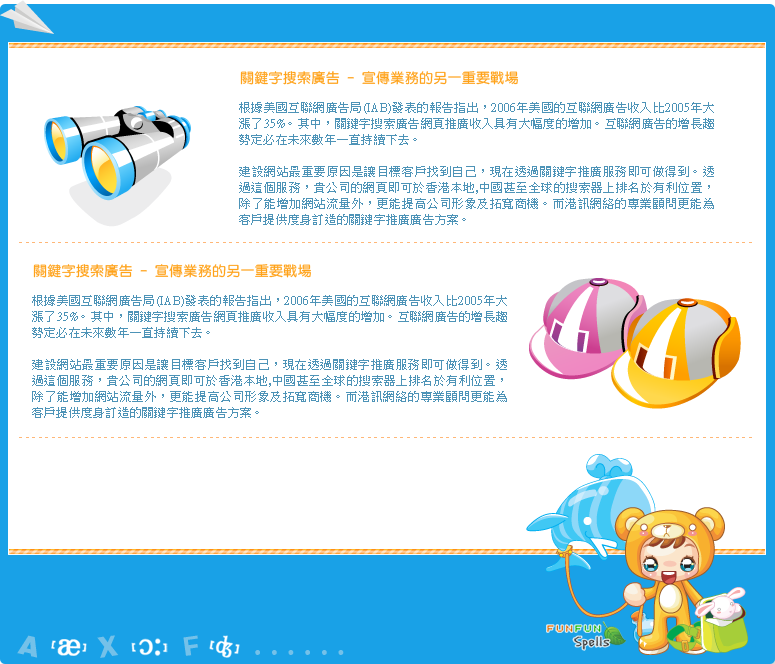
<style>
.page{position:relative;width:775px;height:664px;background:#ffffff}
.page>*{position:absolute;margin:0}
.t1{font:14px "DFYuan-Md-HK-BF";letter-spacing:0.02em;color:#ffa219}
.t2{font:12px/16px "PMingLiU";letter-spacing:0.02em;color:#4d93b7}
.t3{font:6px "DFYuan-Md-HK-BF";letter-spacing:0.05em;color:#ffb777}
.t4{font:26.9px "HelveticaLT-Black";letter-spacing:0.02em;color:#74c1e9}
.t5{font:25.8px "Addled";letter-spacing:0.02em;color:#74c1e9}
.t6{font:23.4px "Addled";letter-spacing:0.02em;color:#74c1e9}
</style>
<div class="page">
<p class="t1" style="left:240px;top:71px;width:278px;height:14px">關鍵字搜索廣告 - 宣傳業務的另一重要戰場</p>
<p class="t2" style="left:239px;top:102px;width:475px;height:123px;text-align:justify">根據美國互聯網廣告局(IAB)發表的報告指出，2006年美國的互聯網廣告收入比2005年大漲了35%。其中，關鍵字搜索廣告網頁推廣收入具有大幅度的增加。互聯網廣告的增長趨勢定必在未來數年一直持續下去。<br><br>建設網站最重要原因是讓目標客戶找到自己，現在透過關鍵字推廣服務即可做得到。透過這個服務，貴公司的網頁即可於香港本地,中國甚至全球的搜索器上排名於有利位置，除了能增加網站流量外，更能提高公司形象及拓寬商機。而港訊網絡的專業顧問更能為客戶提供度身訂造的關鍵字推廣廣告方案。</p>
<p class="t3" style="left:19px;top:242px;width:733px;height:1px">_ _ _ _ _ _ _ _ _ _ _ _ _ _ _ _ _ _ _ _ _ _ _ _ _ _ _ _ _ _ _ _ _ _ _ _ _ _ _ _ _ _ _ _ _ _ _ _ _ _ _ _ _ _ _ _ _ _ _ _ _ _ _ _ _ _ _ _ _ _ _ _ _ _ _ _ _ _ _ _ _ _ _ _ _ _ _ _ _ _ _ _ _ _ _ _ _ _ _ _ _ _ _ _ _ _ _ _ _ _ _ _ _ _ _ _ _ _ _ _ _ _ _ _ _ _ _ _ _ _ _ _</p>
<p class="t1" style="left:33px;top:264px;width:278px;height:14px">關鍵字搜索廣告 - 宣傳業務的另一重要戰場</p>
<p class="t2" style="left:32px;top:295px;width:475px;height:123px;text-align:justify">根據美國互聯網廣告局(IAB)發表的報告指出，2006年美國的互聯網廣告收入比2005年大漲了35%。其中，關鍵字搜索廣告網頁推廣收入具有大幅度的增加。互聯網廣告的增長趨勢定必在未來數年一直持續下去。<br><br>建設網站最重要原因是讓目標客戶找到自己，現在透過關鍵字推廣服務即可做得到。透過這個服務，貴公司的網頁即可於香港本地,中國甚至全球的搜索器上排名於有利位置，除了能增加網站流量外，更能提高公司形象及拓寬商機。而港訊網絡的專業顧問更能為客戶提供度身訂造的關鍵字推廣廣告方案。</p>
<p class="t3" style="left:19px;top:437px;width:733px;height:1px">_ _ _ _ _ _ _ _ _ _ _ _ _ _ _ _ _ _ _ _ _ _ _ _ _ _ _ _ _ _ _ _ _ _ _ _ _ _ _ _ _ _ _ _ _ _ _ _ _ _ _ _ _ _ _ _ _ _ _ _ _ _ _ _ _ _ _ _ _ _ _ _ _ _ _ _ _ _ _ _ _ _ _ _ _ _ _ _ _ _ _ _ _ _ _ _ _ _ _ _ _ _ _ _ _ _ _ _ _ _ _ _ _ _ _ _ _ _ _ _ _ _ _ _ _ _ _ _ _ _ _ _</p>
<p class="t4" style="left:17px;top:635px;width:21px;height:23px;rotate:13deg">A</p>
<p class="t5" style="left:97px;top:635px;width:22px;height:23px;rotate:-9deg">X</p>
<p class="t6" style="left:183px;top:635px;width:15px;height:21px;rotate:-8deg">F</p>
<p class="t6" style="left:255px;top:650px;width:89px;height:5px">. . . . . .</p>
</div>
